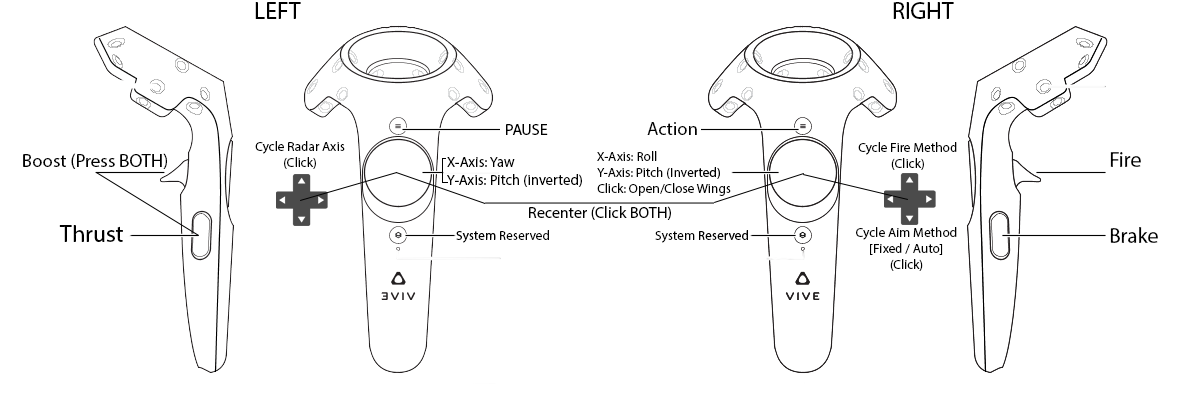
<style>
.page{position:relative;width:1200px;height:408px;background:#ffffff}
.page>*{position:absolute;margin:0}
.t1{font:24px "MyriadPro-Regular";color:#000000}
.t2{font:16px "MyriadPro-Regular";color:#000000}
.t3{font:18.7px "MyriadPro-Regular";color:#000000}
.t4{font:13.3px "MyriadPro-Regular";color:#000000}
.t5{font:14.7px "MyriadPro-Regular";color:#000000}
.t6{font:21.3px "MyriadPro-Regular";color:#000000}
</style>
<div class="page">
<p class="t1" style="left:255px;top:2px;width:46px;height:17px">LEFT</p>
<p class="t1" style="left:893px;top:2px;width:61px;height:17px">RIGHT</p>
<p class="t2" style="left:506px;top:124px;width:42px;height:11px">PAUSE</p>
<p class="t3" style="left:647px;top:122px;width:50px;height:13px">Action</p>
<p class="t4" style="left:255px;top:141px;width:90px;height:28px;text-align:center">Cycle Radar Axis <br>(Click)</p>
<p class="t4" style="left:858px;top:142px;width:99px;height:28px;text-align:center">Cycle Fire Method<br>(Click)</p>
<p class="t3" style="left:23px;top:153px;width:144px;height:16px">Boost (Press BOTH)</p>
<p class="t5" style="left:447px;top:157px;width:135px;height:30px">X-Axis: Yaw<br>Y-Axis: Pitch (inverted)</p>
<p class="t4" style="left:597px;top:151px;width:134px;height:45px">X-Axis: Roll<br>Y-Axis: Pitch (Inverted)<br>Click: Open/Close Wings</p>
<p class="t6" style="left:1110px;top:152px;width:31px;height:15px">Fire</p>
<p class="t2" style="left:529px;top:206px;width:142px;height:14px">Recenter (Click BOTH)</p>
<p class="t1" style="left:59px;top:225px;width:64px;height:17px">Thrust</p>
<p class="t4" style="left:456px;top:230px;width:93px;height:13px">System Reserved</p>
<p class="t4" style="left:655px;top:230px;width:93px;height:13px">System Reserved</p>
<p class="t4" style="left:856px;top:227px;width:101px;height:44px;text-align:center">Cycle Aim Method<br>[Fixed / Auto]<br>(Click)</p>
<p class="t6" style="left:1110px;top:227px;width:48px;height:16px">Brake</p>
</div>
